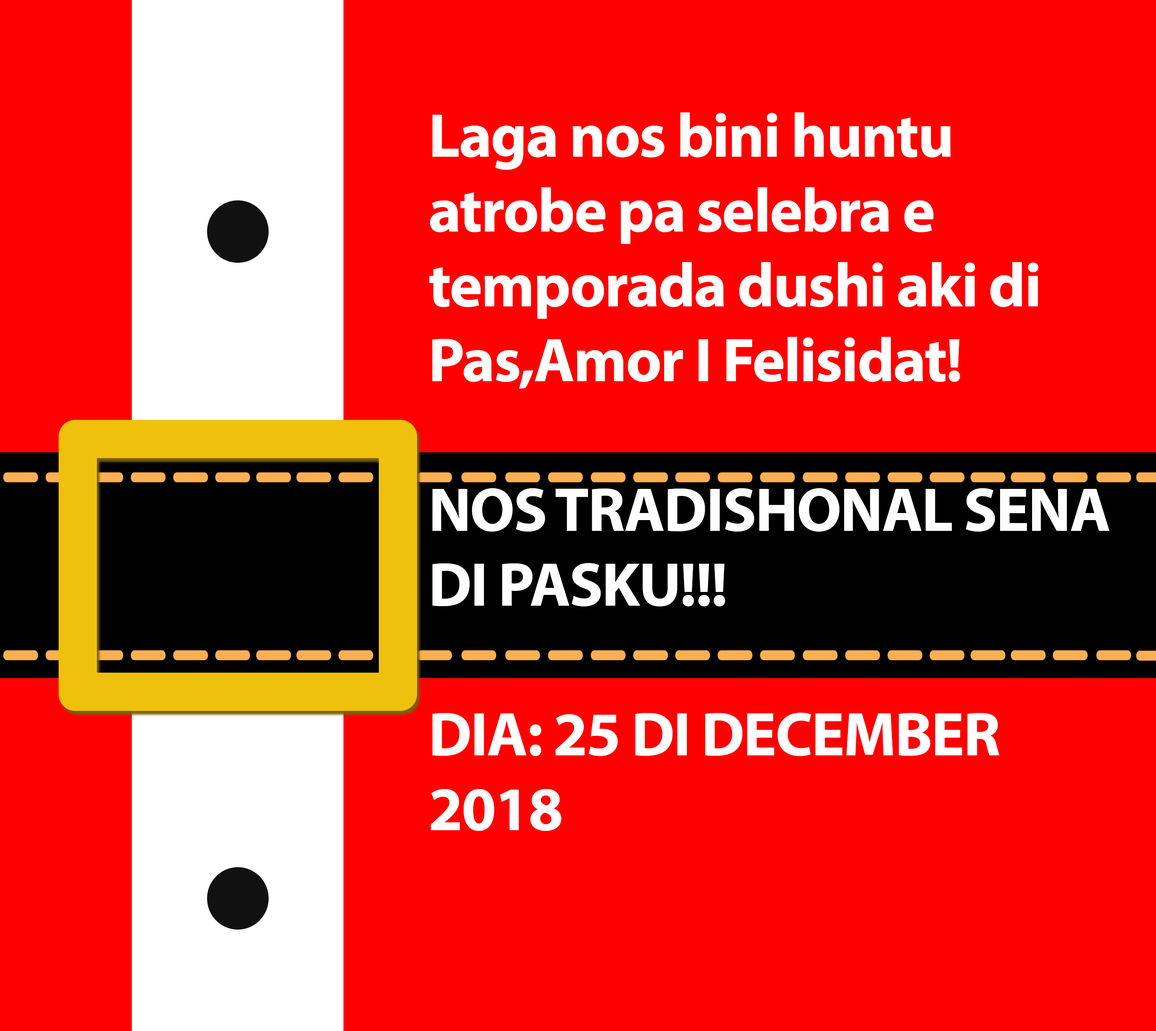
<style>
.page{position:relative;width:1156px;height:1031px;background:#ff0000}
.page>*{position:absolute;margin:0}
.t1{font:62.4px "MyriadPro-Bold";letter-spacing:-0.02em;color:#ffffff}
</style>
<div class="page">
<p class="t1" style="left:429px;top:112px;width:681px;height:719px">Laga nos bini huntu atrobe pa selebra e temporada dushi aki di Pas,Amor I Felisidat!<br><br>NOS TRADISHONAL SENA DI PASKU!!!<br><br>DIA: 25 DI DECEMBER 2018<br><br>NA: KAYA STRAUSS # 2<br><br>FOR DI: 18:00 (6OR ATARDI)<br><br>PREIS DI FAMIA : FL. 50,-- PA PERSONA,<br><br>TEENER FL.35,--(NO alcohol)<br><br>MUCHA TE KU 10 ANJA FL. 15,-<br><br>PAGA TEMPRAN PA BO TA ADEN<br><br>Trahe: Formal</p>
</div>
